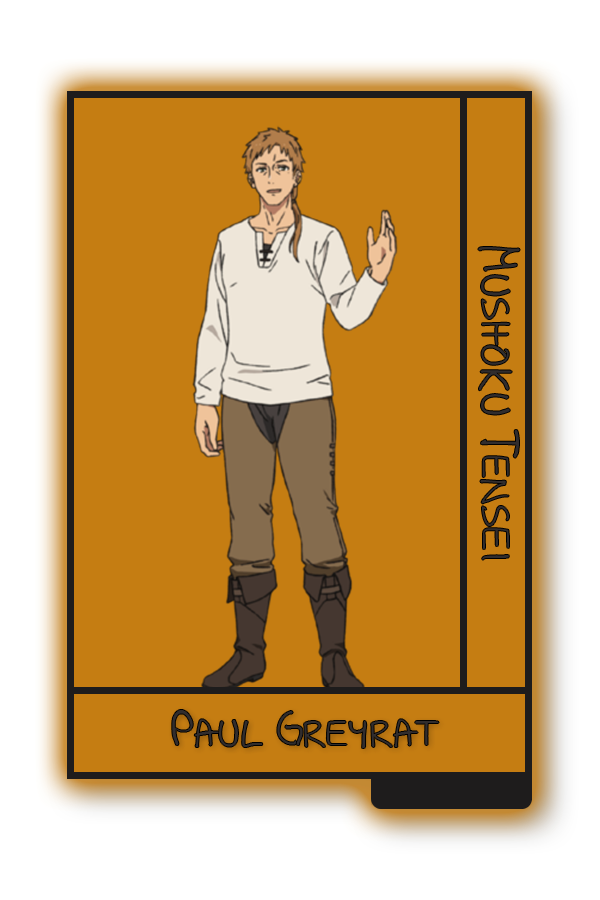
<style>
.page{position:relative;width:600px;height:900px;background:#c57d12}
.page>*{position:absolute;margin:0}
.t1{font:41px "AllCaps";color:#312d2d}
.t2{font:38.3px "AllCaps";color:#312d2d}
</style>
<div class="page">
<p class="t1" style="left:478px;top:247px;width:42px;height:313px;rotate:90deg">Mushoku Tensei</p>
<p class="t2" style="left:172px;top:710px;width:267px;height:38px">Paul Greyrat</p>
</div>
